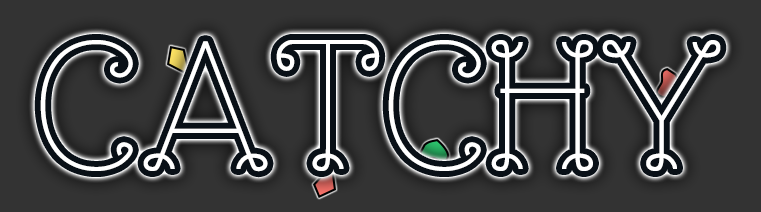
<style>
.page{position:relative;width:761px;height:212px;background:#333333}
.page>*{position:absolute;margin:0}
.t1{font:200px "BouclettesDemo-Medium";letter-spacing:-0.01em;color:#ffffff}
</style>
<div class="page">
<p class="t1" style="left:40px;top:40px;width:681px;height:132px">CATCHY</p>
</div>
